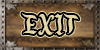
<style>
.page{position:relative;width:100px;height:50px}
.page>*{position:absolute;margin:0}
.t1{font:30.8px "EnchantedLand";color:#e4d7a3}
</style>
<div class="page">
<p class="t1" style="left:22px;top:13px;width:57px;height:22px">EXIT</p>
<p class="t1" style="left:22px;top:13px;width:57px;height:22px">EXIT</p>
</div>
